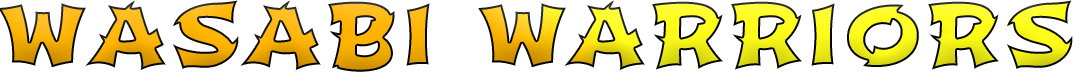
<style>
.page{position:relative;width:1073px;height:74px;background:#ffffff}
.page>*{position:absolute;margin:0}
.t1{font:83.3px "Shojumaru-Regular";letter-spacing:0.075em}
</style>
<div class="page">
<p class="t1" style="left:0px;top:0px;width:1073px;height:72px">WASABI WARRIORS</p>
</div>
